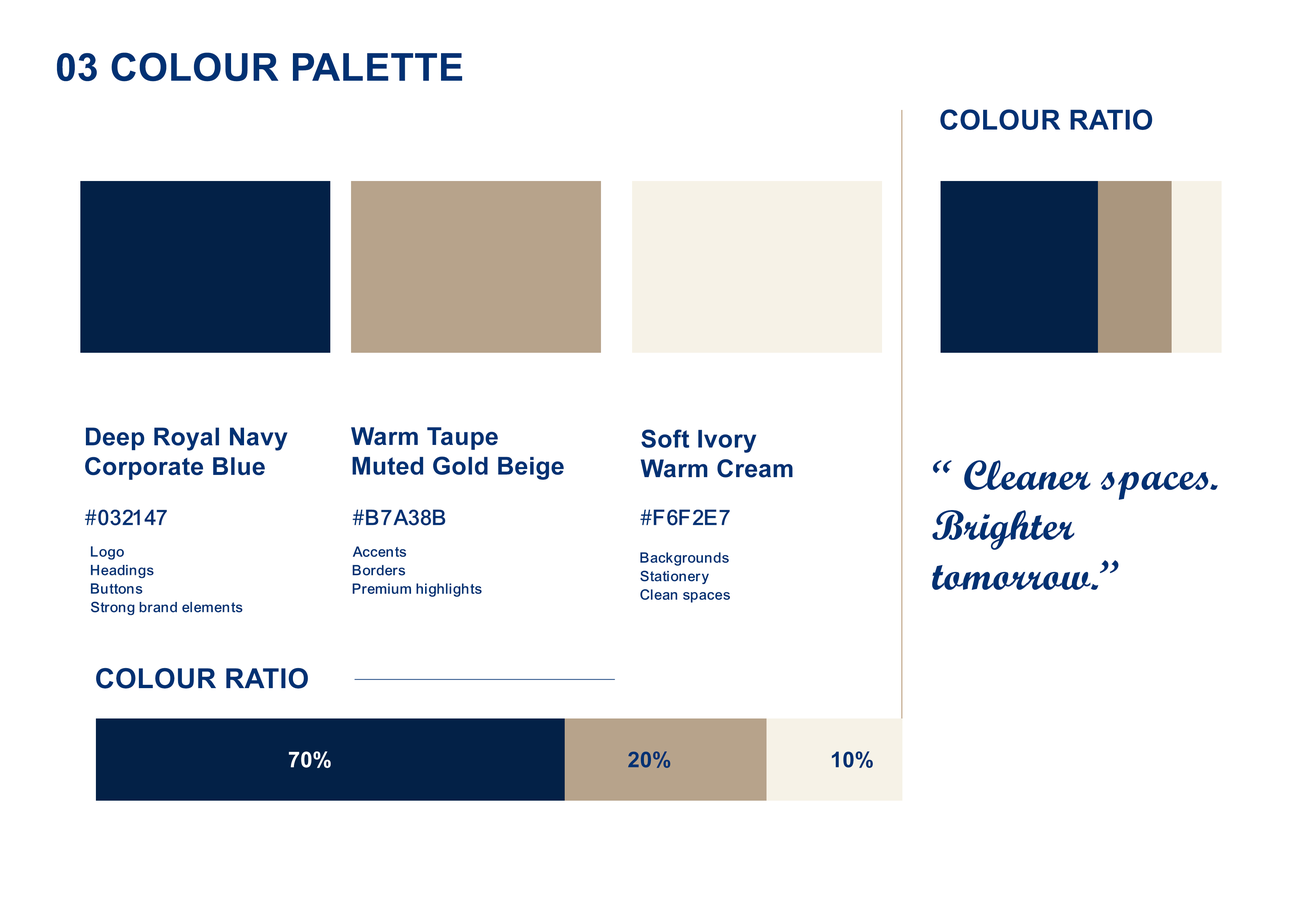
<style>
.page{position:relative;width:1299px;height:918px;background:#ffffff}
.page>*{position:absolute;margin:0}
.t1{font:38.5px "Arial-BoldMT";letter-spacing:0.01em;color:#013173}
.t2{font:27.7px "Arial-BoldMT";letter-spacing:0.01em;color:#013173}
.t3{font:24.7px "Arial-BoldMT";letter-spacing:0.01em;color:#013173}
.t4{font:41.6px "ScriptMTBold";letter-spacing:0.01em;color:#013173}
.t5{font:23.1px "Arial-Mdm";letter-spacing:0.01em;color:#013173}
.t6{font:23.1px "Arial-Mdm";letter-spacing:0.01em;color:#013173;text-transform:uppercase}
.t7{font:15.4px "Arial-Mdm";letter-spacing:0.01em;color:#013173}
.t8{font:21.7px "Arial-BoldMT";letter-spacing:0.01em;color:#ffffff}
.t9{font:21.7px "Arial-BoldMT";letter-spacing:0.01em;color:#013173}
</style>
<div class="page">
<p class="t1" style="left:57px;top:53px;width:405px;height:28px">03 COLOUR PALETTE</p>
<p class="t2" style="left:940px;top:109px;width:212px;height:21px">COLOUR RATIO</p>
<p class="t3" style="left:85px;top:428px;width:203px;height:52px">Deep Royal Navy<br>Corporate Blue</p>
<p class="t3" style="left:351px;top:427px;width:213px;height:53px">Warm Taupe<br>Muted Gold Beige</p>
<p class="t3" style="left:640px;top:429px;width:152px;height:49px">Soft Ivory<br>Warm Cream</p>
<p class="t4" style="left:932px;top:460px;width:286px;height:130px">“ Cleaner spaces.<br>Brighter <br>tomorrow.”</p>
<p class="t5" style="left:85px;top:509px;width:82px;height:17px">#032147</p>
<p class="t6" style="left:352px;top:509px;width:93px;height:17px">#b7a38b</p>
<p class="t6" style="left:640px;top:509px;width:90px;height:17px">#f6f2e7</p>
<p class="t7" style="left:91px;top:546px;width:151px;height:69px">Logo<br>Headings<br>Buttons<br>Strong brand elements</p>
<p class="t7" style="left:352px;top:546px;width:130px;height:51px">Accents<br>Borders<br>Premium highlights</p>
<p class="t7" style="left:640px;top:552px;width:90px;height:51px">Backgrounds<br>Stationery<br>Clean spaces</p>
<p class="t2" style="left:96px;top:668px;width:212px;height:21px">COLOUR RATIO</p>
<p class="t8" style="left:289px;top:752px;width:42px;height:16px">70%</p>
<p class="t9" style="left:628px;top:752px;width:42px;height:16px">20%</p>
<p class="t9" style="left:832px;top:752px;width:41px;height:16px">10%</p>
</div>
